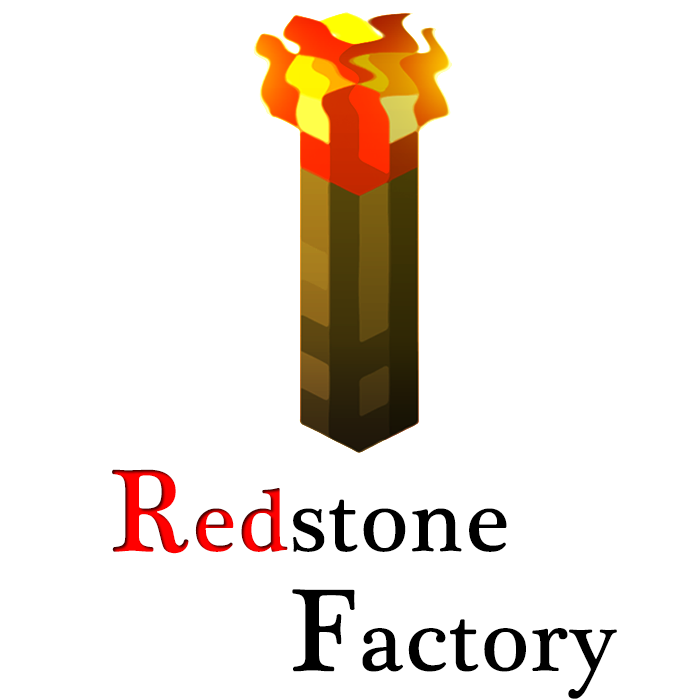
<style>
.page{position:relative;width:700px;height:700px;background:#ffffff}
.page>*{position:absolute;margin:0}
.t1{font:89.7px/119.6px "PlantagenetCherokee";color:#000000;font-weight:bold}
.t2{font:90.2px/119.6px "PlantagenetCherokee";color:#ff0000;font-weight:bold}
.t3{font:119.6px/119.6px "PlantagenetCherokee";color:#ff0000;font-weight:bold}
.t4{font:89.7px/119.6px "PlantagenetCherokee";color:#ff0000;font-weight:bold}
.t5{font:119.6px/119.6px "PlantagenetCherokee";color:#000000;font-weight:bold}
</style>
<div class="page">
<p class="t1" style="left:112px;top:469px;width:505px;height:230px"><span class="t2"> </span><span class="t3">R</span><span class="t4">ed</span>stone<br><span class="t5">F</span>actory</p>
</div>
